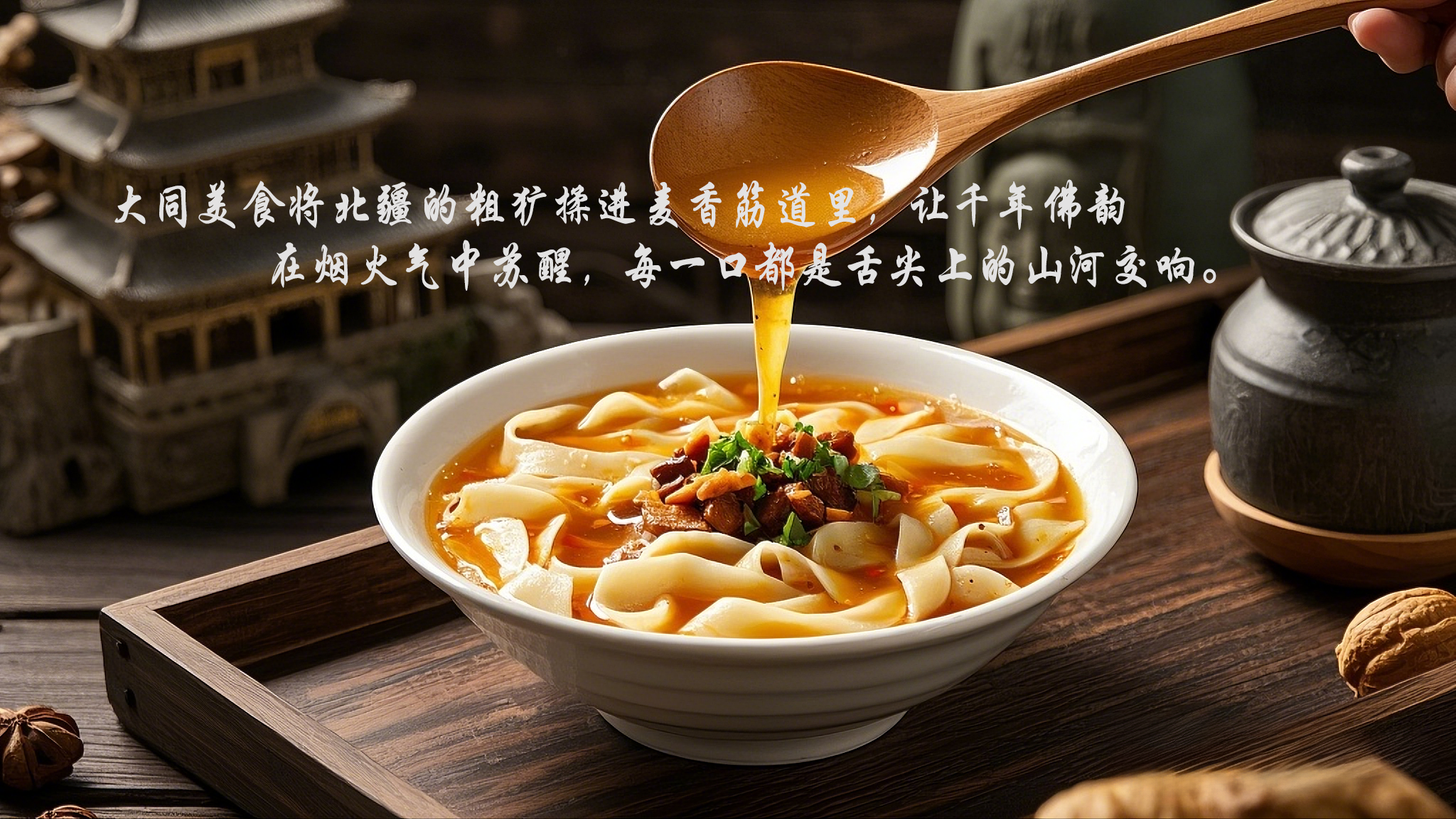
<style>
.page{position:relative;width:1456px;height:819px}
.page>*{position:absolute;margin:0}
.t1{font:51.2px/60.9px "STXingkai";color:#e3e2e2;scale:0.87 1}
</style>
<div class="page">
<p class="t1" style="left:114px;top:179px;width:1102px;height:112px">大同美食将北疆的粗犷揉进麦香筋道里，让千年佛韵<br>      在烟火气中苏醒，每一口都是舌尖上的山河交响。</p>
</div>
